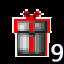
<style>
.page{position:relative;width:64px;height:64px;background:#000000}
.page>*{position:absolute;margin:0}
.t1{font:24px "SegoeUI";letter-spacing:0.01em;color:#f5f5ff;font-weight:bold}
</style>
<div class="page">
<p class="t1" style="left:51px;top:44px;width:12px;height:18px">9</p>
</div>
